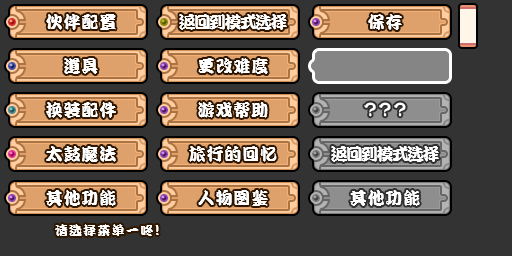
<style>
.page{position:relative;width:512px;height:256px;background:#333333}
.page>*{position:absolute;margin:0}
.t1{font:17px "DFPKanTingLiuW9";letter-spacing:0.05em;color:#ffffff}
.t2{font:17px "DFPKanTingLiuW9";letter-spacing:-0.1em;color:#ffffff}
.t3{font:13px "DFPKanTingLiuW9";letter-spacing:0.1em;color:#ffffff}
.t4{font:15px "DFPKanTingLiuW9";letter-spacing:0.1em;color:#ffffff}
</style>
<div class="page">
<p class="t1" style="left:46px;top:14px;width:70px;height:16px">伙伴配置</p>
<p class="t2" style="left:179px;top:14px;width:108px;height:16px">返回到模式选择</p>
<p class="t1" style="left:368px;top:14px;width:34px;height:16px">保存</p>
<p class="t1" style="left:64px;top:58px;width:34px;height:16px">道具</p>
<p class="t1" style="left:198px;top:58px;width:70px;height:16px">更改难度</p>
<p class="t1" style="left:46px;top:102px;width:70px;height:16px">换装配件</p>
<p class="t1" style="left:198px;top:102px;width:70px;height:16px">游戏帮助</p>
<p class="t1" style="left:46px;top:146px;width:70px;height:16px">太鼓魔法</p>
<p class="t1" style="left:189px;top:146px;width:88px;height:16px">旅行的回忆</p>
<p class="t2" style="left:331px;top:146px;width:108px;height:16px">返回到模式选择</p>
<p class="t1" style="left:46px;top:190px;width:70px;height:16px">其他功能</p>
<p class="t1" style="left:198px;top:190px;width:70px;height:16px">人物图鉴</p>
<p class="t1" style="left:350px;top:190px;width:70px;height:16px">其他功能</p>
<p class="t3" style="left:55px;top:224px;width:104px;height:12px">请选择菜单一咚<span class="t4">!</span></p>
</div>
